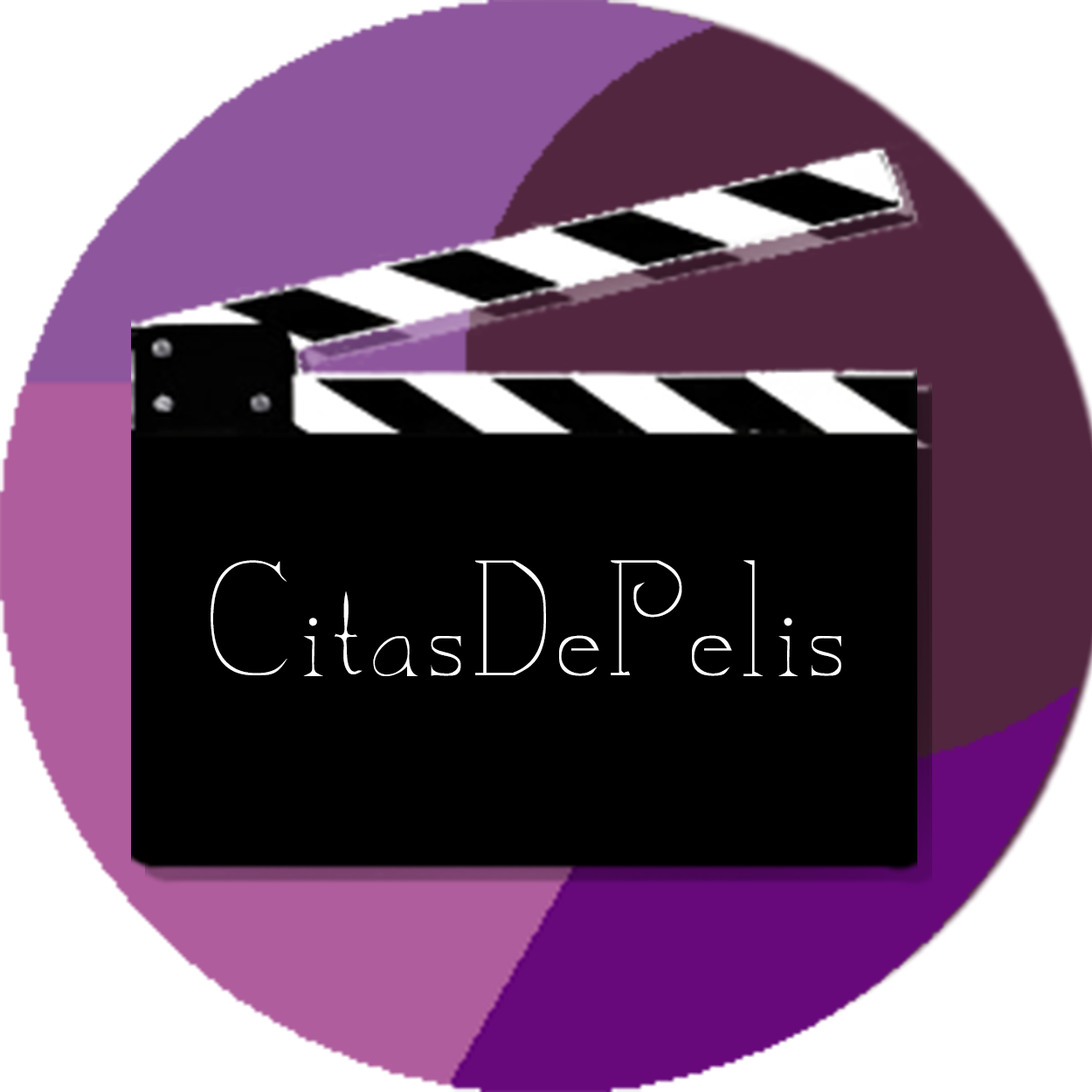
<style>
.page{position:relative;width:1092px;height:1092px;background:#000000}
.page>*{position:absolute;margin:0}
.t1{font:174.7px "CamelotDeNada";color:#ffffff}
</style>
<div class="page">
<p class="t1" style="left:211px;top:560px;width:630px;height:116px">CitasDePelis</p>
</div>
